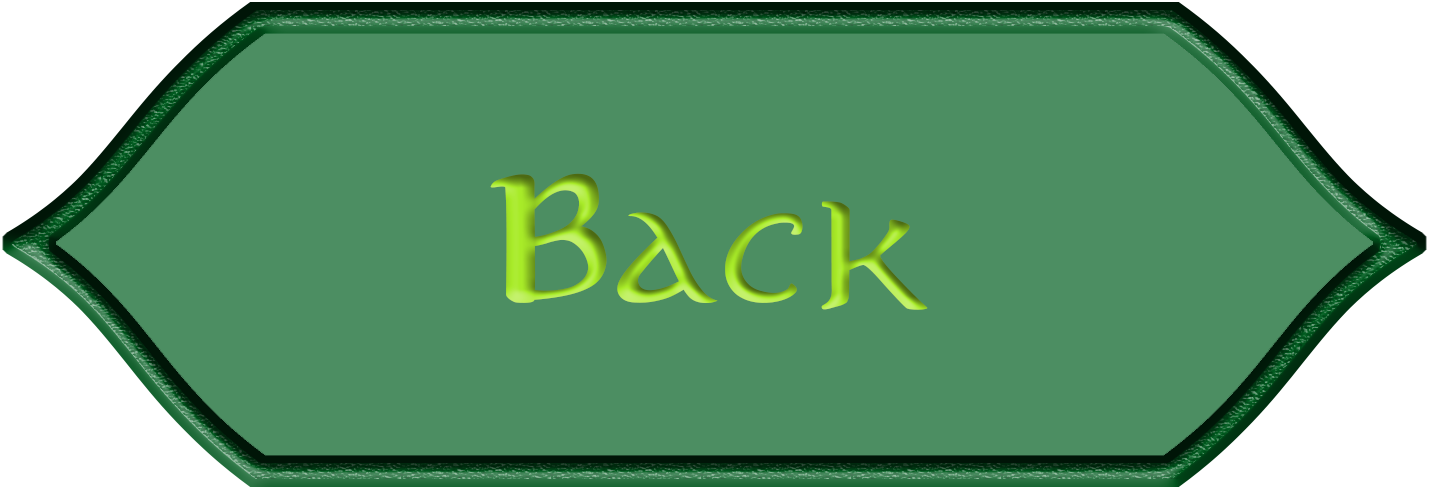
<style>
.page{position:relative;width:1429px;height:489px;background:#4c8e62}
.page>*{position:absolute;margin:0}
.t1{font:179.2px "MiddleEarth"}
</style>
<div class="page">
<p class="t1" style="left:490px;top:173px;width:438px;height:137px">Back</p>
</div>
